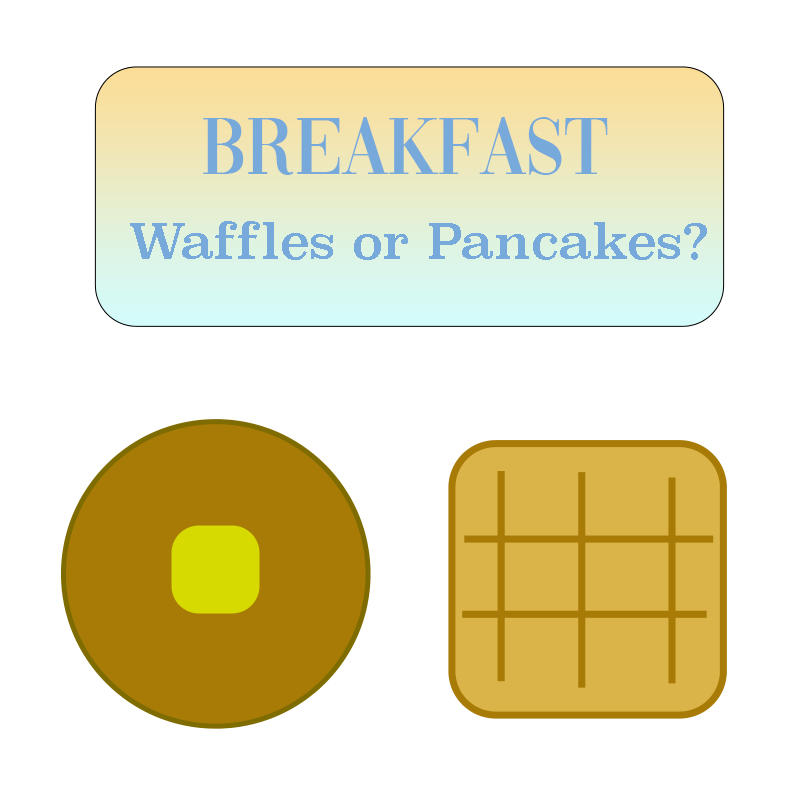
<style>
.page{position:relative;width:800px;height:800px;background:#ffffff}
.page>*{position:absolute;margin:0}
.t1{font:84px "Vogue-Regular";color:#77aada}
.t2{font:48px "Superclarendon-Regular";color:#77aada}
</style>
<div class="page">
<p class="t1" style="left:203px;top:117px;width:405px;height:58px">Breakfast</p>
<p class="t2" style="left:130px;top:221px;width:577px;height:39px">Waffles or Pancakes?</p>
</div>
